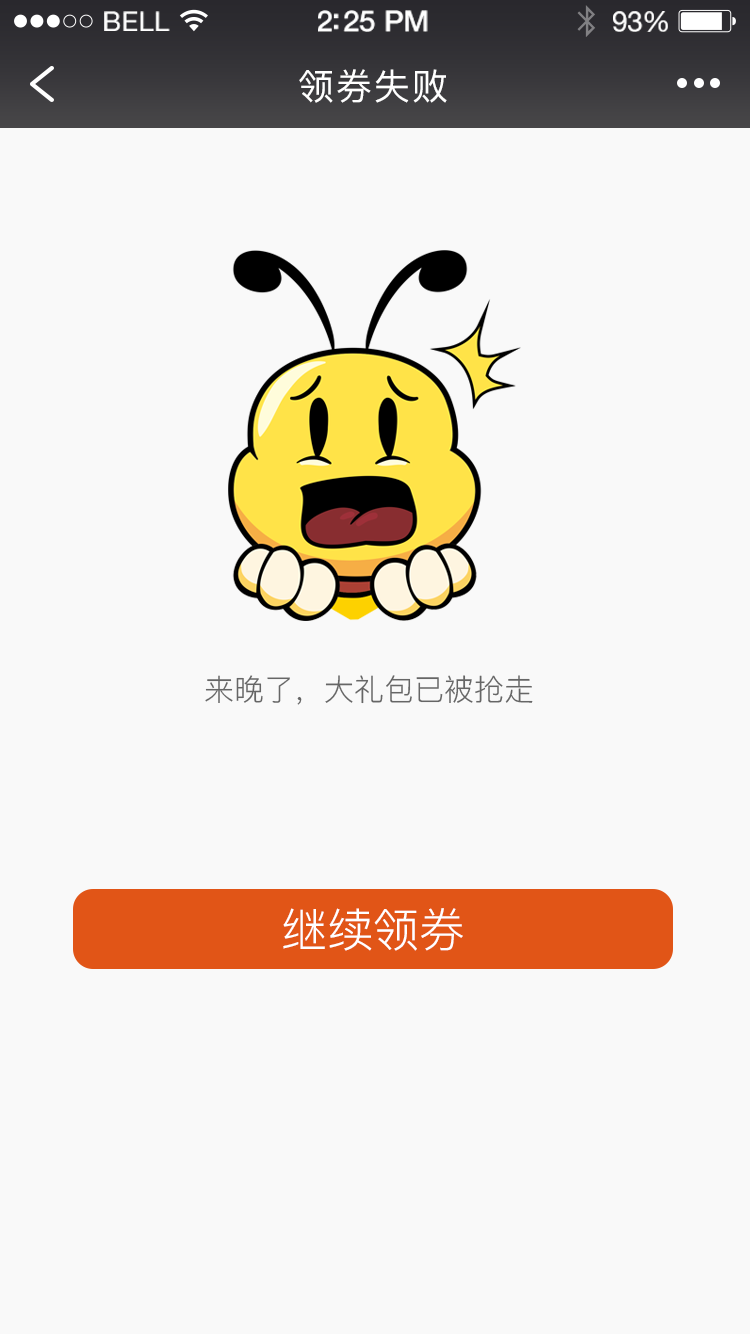
<style>
.page{position:relative;width:750px;height:1334px;background:#f9f9f9}
.page>*{position:absolute;margin:0}
.t1{font:27px "HelveticaNeue";letter-spacing:0.02em;color:#ffffff}
.t2{font:29.4px "HelveticaNeue-Medium";letter-spacing:-0.02em;color:#ffffff}
.t3{font:28.2px "HelveticaNeue";letter-spacing:-0.02em;color:#ffffff}
.t4{font:36px "PingFang-SC-Medium";letter-spacing:0.06em;color:#ffffff}
.t5{font:30px "PingFang-SC-Regular";color:#666666}
.t6{font:46px "PingFang-SC-Regular";color:#ffffff}
</style>
<div class="page">
<p class="t1" style="left:104px;top:11px;width:66px;height:20px">BELL</p>
<p class="t2" style="left:318px;top:10px;width:110px;height:22px">2:25 PM</p>
<p class="t3" style="left:613px;top:11px;width:55px;height:21px">93%</p>
<p class="t4" style="left:299px;top:69px;width:148px;height:34px">领券失败</p>
<p class="t5" style="left:205px;top:675px;width:328px;height:30px">来晚了，大礼包已被抢走</p>
<p class="t6" style="left:283px;top:908px;width:180px;height:43px">继续领券</p>
</div>
